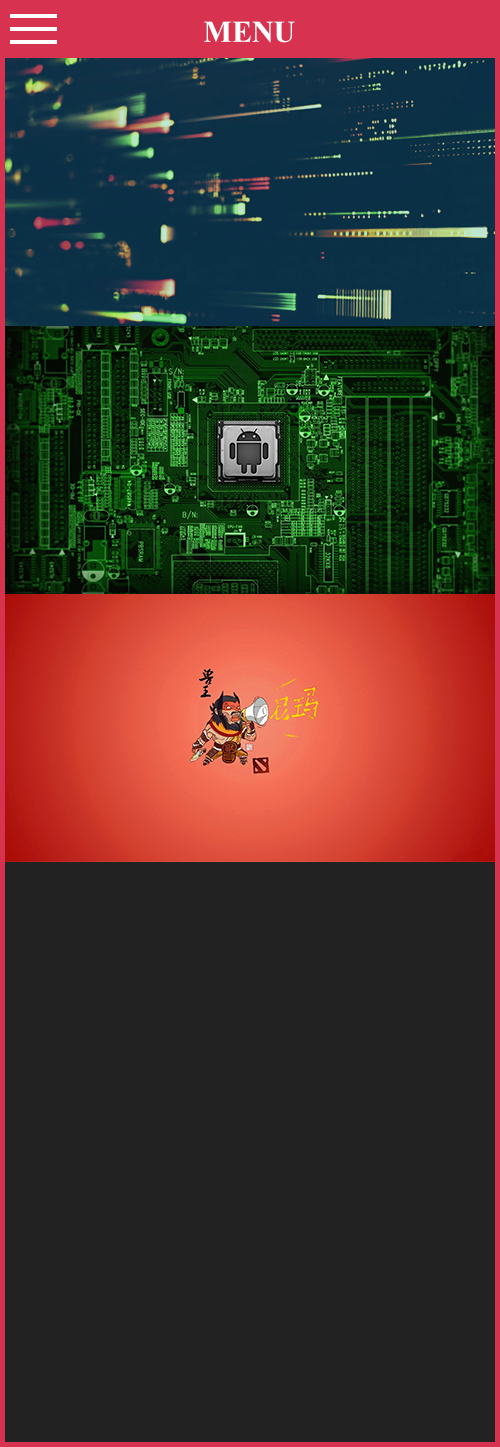
<style>
.page{position:relative;width:500px;height:1447px;background:#222222}
.page>*{position:absolute;margin:0}
.t1{font:30px "TimesNewRomanPS-BoldMT";color:#ffffff}
</style>
<div class="page">
<p class="t1" style="left:204px;top:21px;width:91px;height:22px">MENU</p>
</div>
